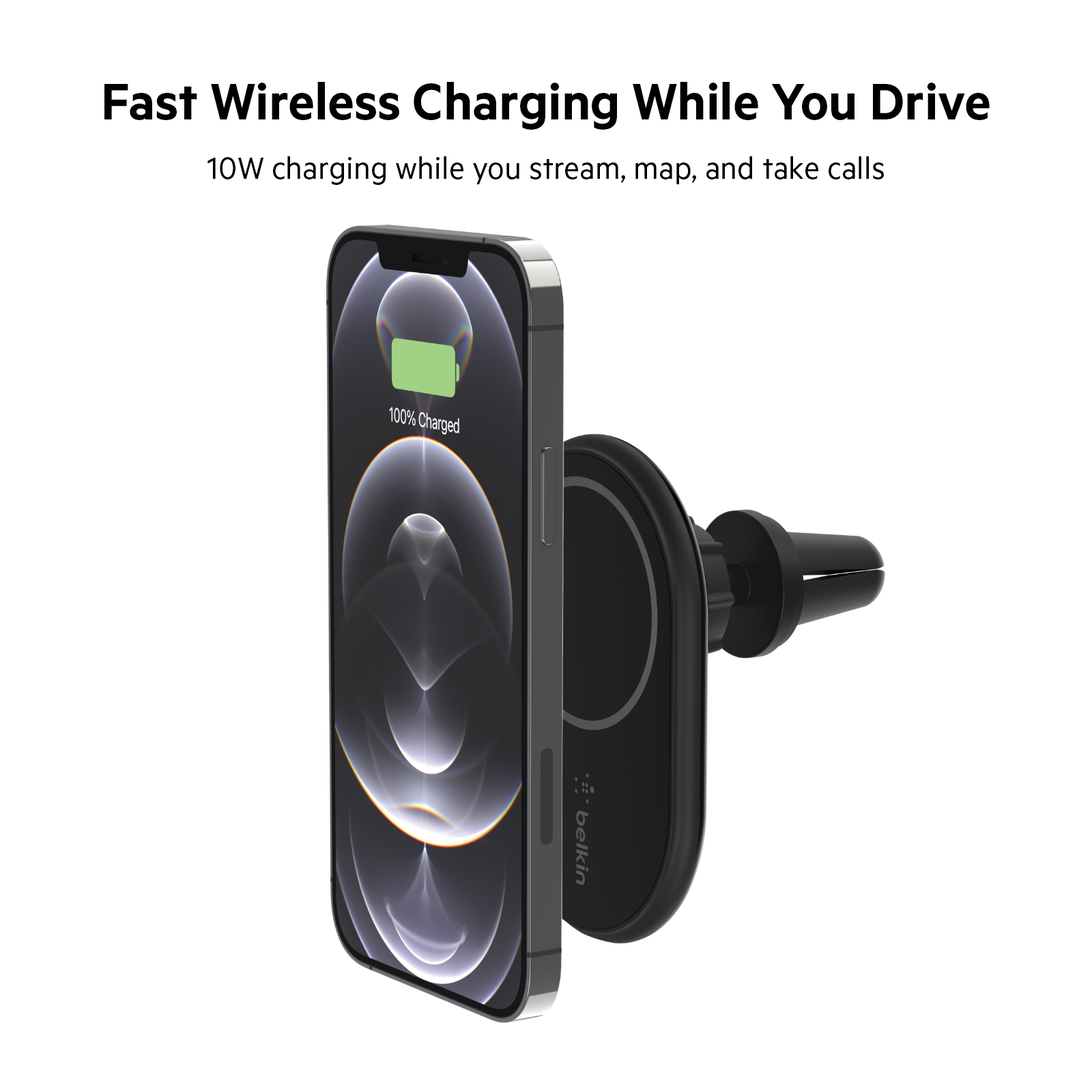
<style>
.page{position:relative;width:1092px;height:1092px;background:#ffffff}
.page>*{position:absolute;margin:0}
.t1{font:57.3px "Metric-Semibold";color:#000000}
.t2{font:34.8px "Metric-Regular";color:#000000}
</style>
<div class="page">
<p class="t1" style="left:104px;top:82px;width:886px;height:48px">Fast Wireless Charging While You Drive</p>
<p class="t2" style="left:207px;top:156px;width:677px;height:29px">10W charging while you stream, map, and take calls</p>
</div>
